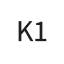
<style>
.page{position:relative;width:64px;height:64px;background:#ffffff}
.page>*{position:absolute;margin:0}
.t1{font:30px "SourceSansRoman-Regular";color:#202024}
</style>
<div class="page">
<p class="t1" style="left:18px;top:21px;width:29px;height:21px">K1</p>
</div>
